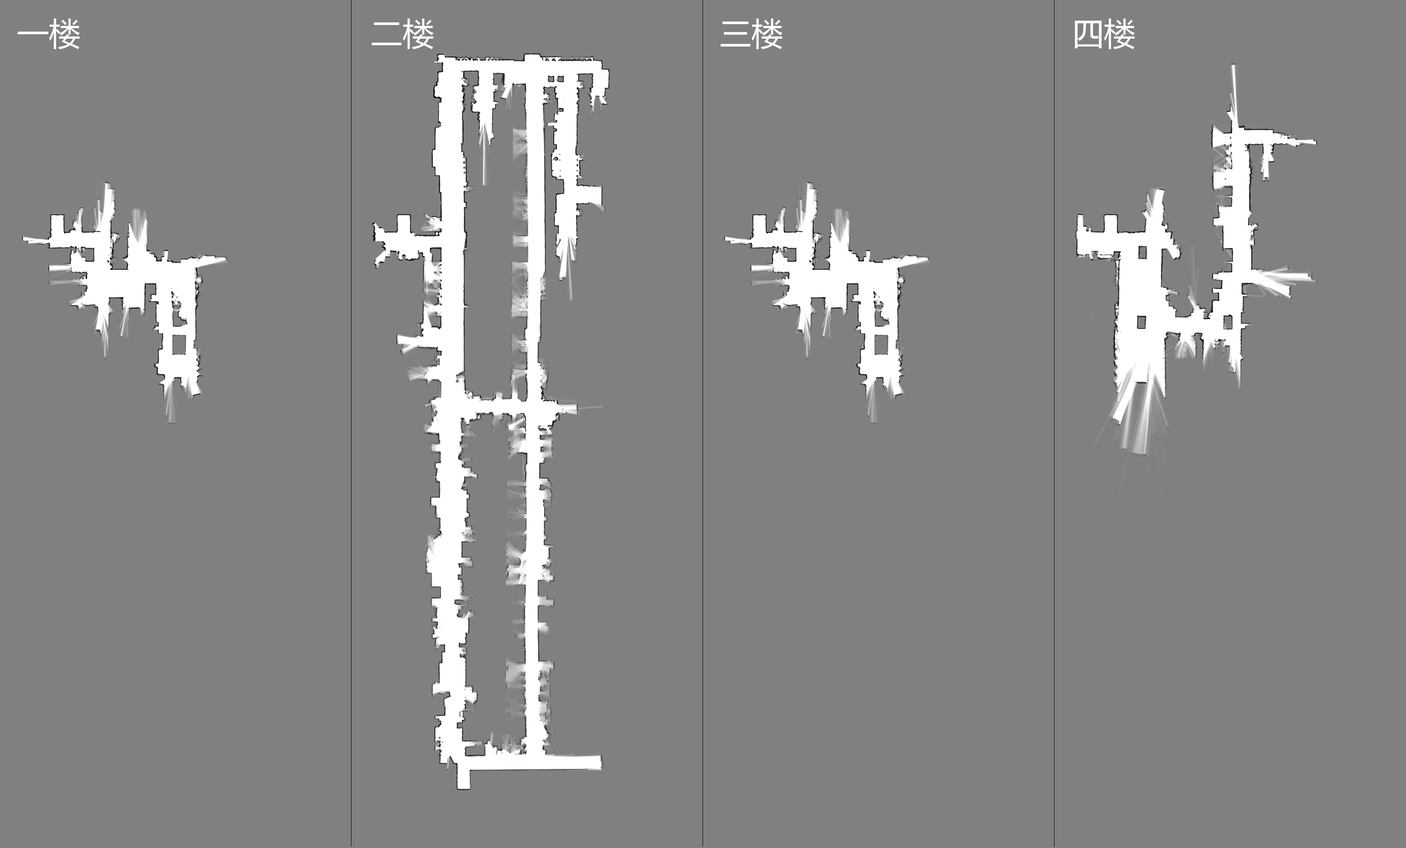
<style>
.page{position:relative;width:1406px;height:848px;background:#808080}
.page>*{position:absolute;margin:0}
.t1{font:31.6px "MicrosoftYaHei";color:#ffffff}
</style>
<div class="page">
<p class="t1" style="left:18px;top:18px;width:62px;height:31px">一楼</p>
<p class="t1" style="left:372px;top:18px;width:62px;height:31px">二楼</p>
<p class="t1" style="left:720px;top:18px;width:62px;height:31px">三楼</p>
<p class="t1" style="left:1075px;top:18px;width:60px;height:31px">四楼</p>
</div>
